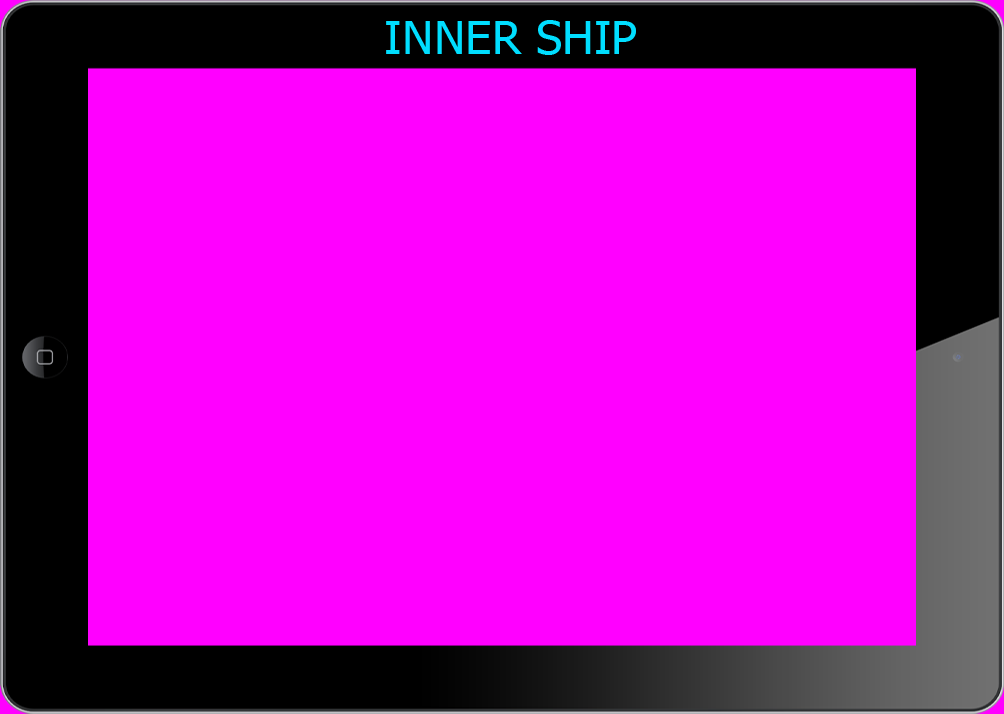
<style>
.page{position:relative;width:1004px;height:714px;background:#ff00ff}
.page>*{position:absolute;margin:0}
.t1{font:46.4px "Tahoma";color:#00deff}
</style>
<div class="page">
<p class="t1" style="left:386px;top:20px;width:250px;height:35px">INNER SHIP</p>
</div>
